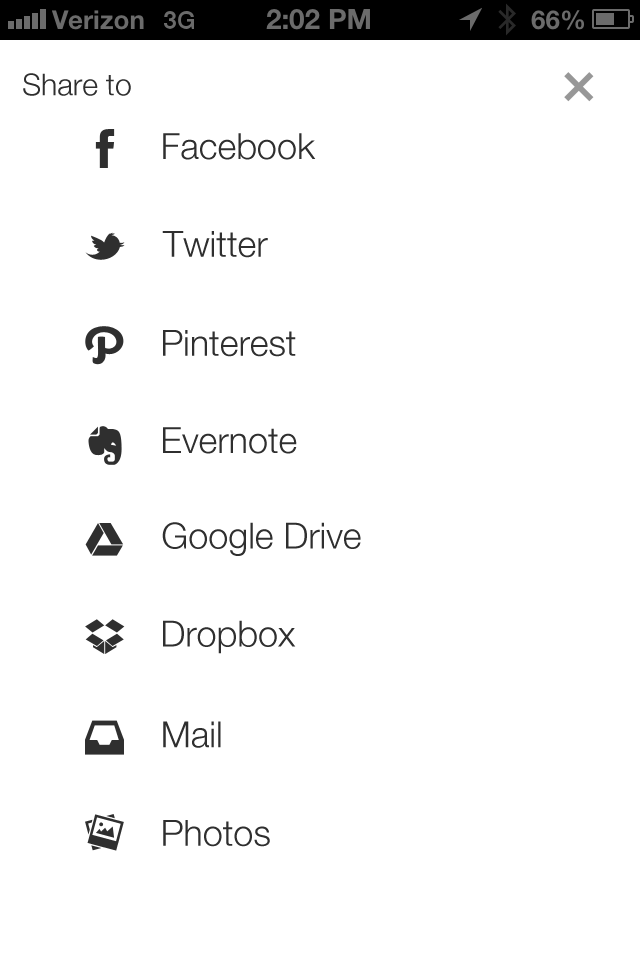
<style>
.page{position:relative;width:640px;height:960px;background:#ffffff}
.page>*{position:absolute;margin:0}
.t1{font:30px "HelveticaNeue-Light";color:#2f2f2f}
.t2{font:36px "HelveticaNeue-Light";color:#2f2f2f}
</style>
<div class="page">
<p class="t1" style="left:23px;top:73px;width:108px;height:23px">Share to</p>
<p class="t2" style="left:163px;top:133px;width:153px;height:27px">Facebook</p>
<p class="t2" style="left:162px;top:231px;width:106px;height:27px">Twitter</p>
<p class="t2" style="left:163px;top:330px;width:133px;height:27px">Pinterest</p>
<p class="t2" style="left:163px;top:427px;width:134px;height:27px">Evernote</p>
<p class="t2" style="left:162px;top:522px;width:199px;height:34px">Google Drive</p>
<p class="t2" style="left:163px;top:620px;width:133px;height:34px">Dropbox</p>
<p class="t2" style="left:163px;top:721px;width:58px;height:27px">Mail</p>
<p class="t2" style="left:163px;top:820px;width:107px;height:27px">Photos</p>
</div>
